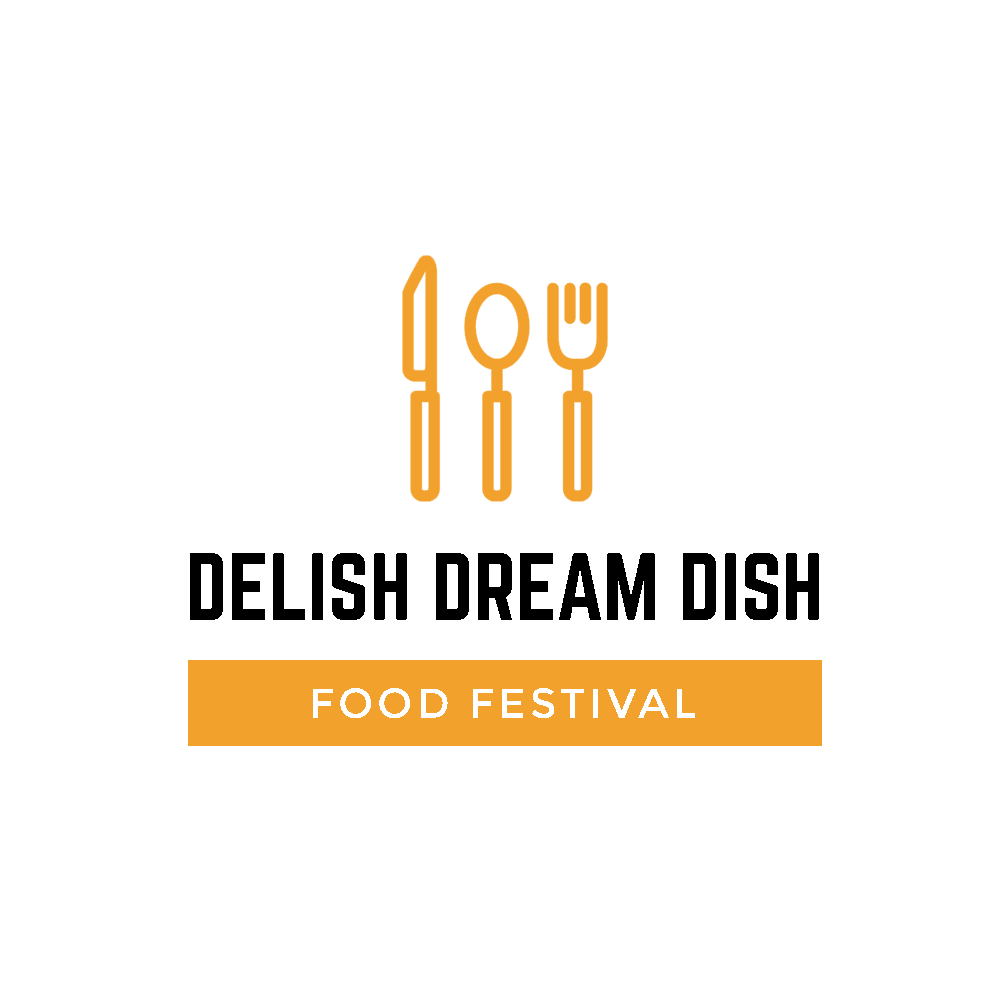
<style>
.page{position:relative;width:1000px;height:1000px;background:#ffffff}
.page>*{position:absolute;margin:0}
.t1{font:83.3px "Norwester-Regular";color:#000000}
.t2{font:41.7px "Montserrat-Regular";letter-spacing:0.1em;color:#ffffff}
</style>
<div class="page">
<p class="t1" style="left:190px;top:553px;width:629px;height:67px">DELISH DREAM DISH</p>
<p class="t2" style="left:313px;top:688px;width:382px;height:30px">FOOD FESTIVAL</p>
</div>
